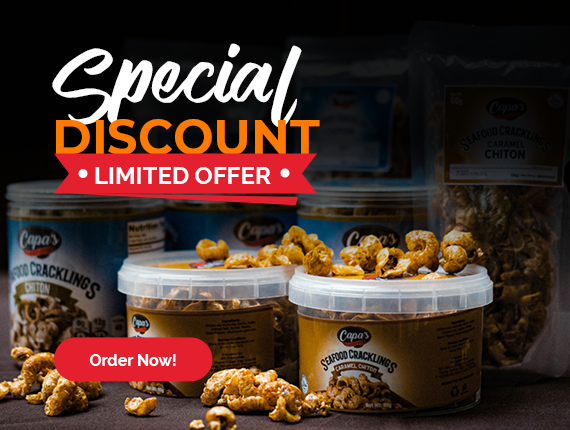
<style>
.page{position:relative;width:570px;height:430px}
.page>*{position:absolute;margin:0}
.t1{font:64px "VendettaRegular";letter-spacing:0.05em;color:#ffffff}
.t2{font:48px "Montserrat-Bold";color:#ff7a00;text-transform:uppercase}
.t3{font:24px "Raleway-Bold";color:#ffffff}
.t4{font:16px "Raleway-Bold";color:#ffffff}
</style>
<div class="page">
<p class="t1" style="left:52px;top:43px;width:250px;height:85px">Special</p>
<p class="t2" style="left:56px;top:119px;width:264px;height:36px">Discount</p>
<p class="t3" style="left:95px;top:167px;width:176px;height:17px">LIMITED OFFER</p>
<p class="t4" style="left:89px;top:354px;width:87px;height:12px">Order Now!</p>
</div>
